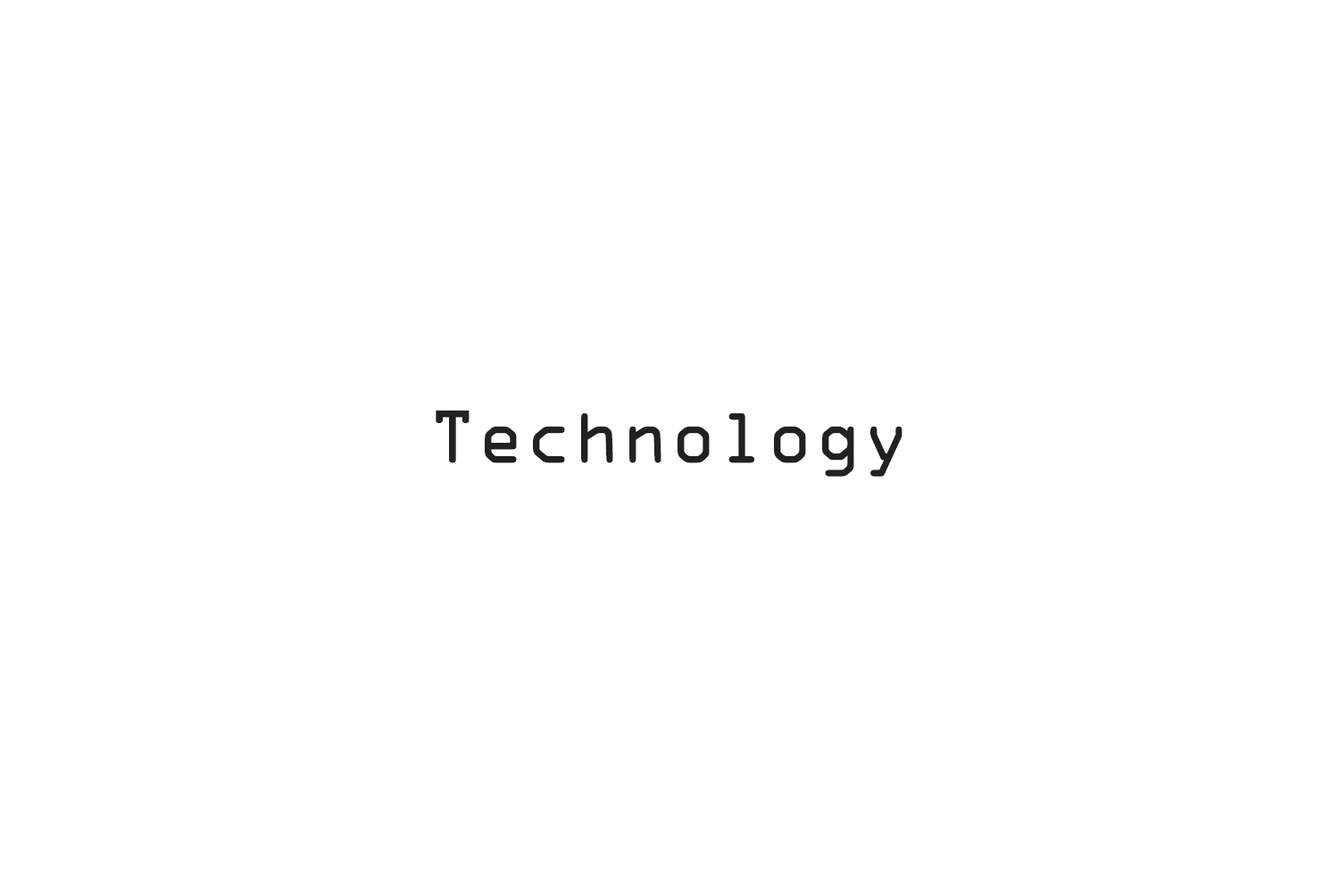
<style>
.page{position:relative;width:1339px;height:890px;background:#ffffff}
.page>*{position:absolute;margin:0}
.t1{font:67px "OCRAStd";color:#212121}
</style>
<div class="page">
<p class="t1" style="left:436px;top:410px;width:467px;height:67px">Technology</p>
</div>
